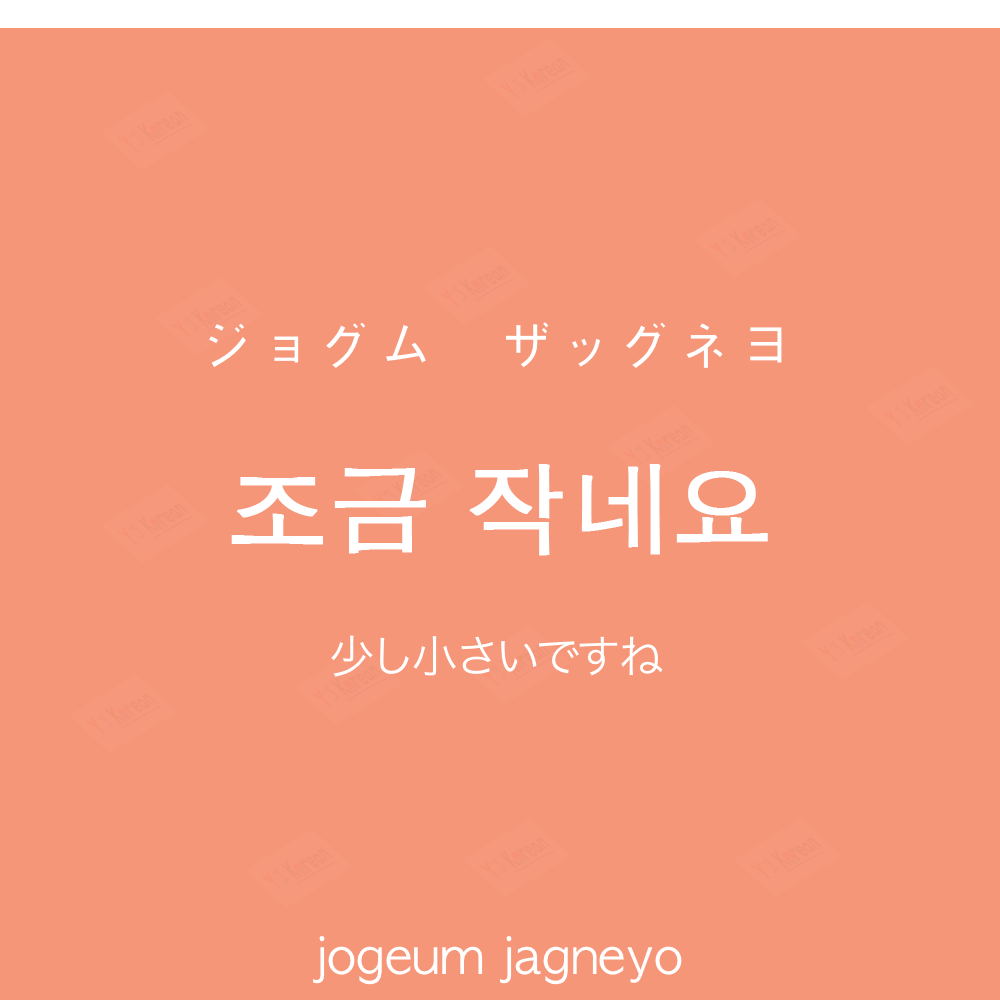
<style>
.page{position:relative;width:1000px;height:1000px;background:#f69679}
.page>*{position:absolute;margin:0}
.t1{font:60px "AppleGothic";color:#ffffff}
.t2{font:100px "AppleGothic";color:#ffffff;font-weight:bold}
.t3{font:45px "HiraKakuProN-W3";color:#ffffff}
.t4{font:50px "AppleGothic";color:#ffffff}
</style>
<div class="page">
<p class="t1" style="left:209px;top:322px;width:573px;height:46px">ジョグム　ザッグネヨ</p>
<p class="t2" style="left:231px;top:464px;width:537px;height:92px">조금 작네요</p>
<p class="t3" style="left:331px;top:635px;width:332px;height:42px">少し小さいですね</p>
<p class="t4" style="left:313px;top:936px;width:369px;height:49px">jogeum jagneyo</p>
</div>
